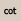
<style>
.page{position:relative;width:21px;height:21px;background:#d9cdc1}
.page>*{position:absolute;margin:0}
.t1{font:9px "Tahoma";color:#000000}
</style>
<div class="page">
<p class="t1" style="left:4px;top:7px;width:13px;height:8px">cot</p>
</div>
